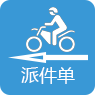
<style>
.page{position:relative;width:95px;height:95px;background:#3998d6}
.page>*{position:absolute;margin:0}
.t1{font:18px "MicrosoftYaHei";color:#ffffff}
</style>
<div class="page">
<p class="t1" style="left:21px;top:67px;width:54px;height:17px">派件单</p>
</div>
